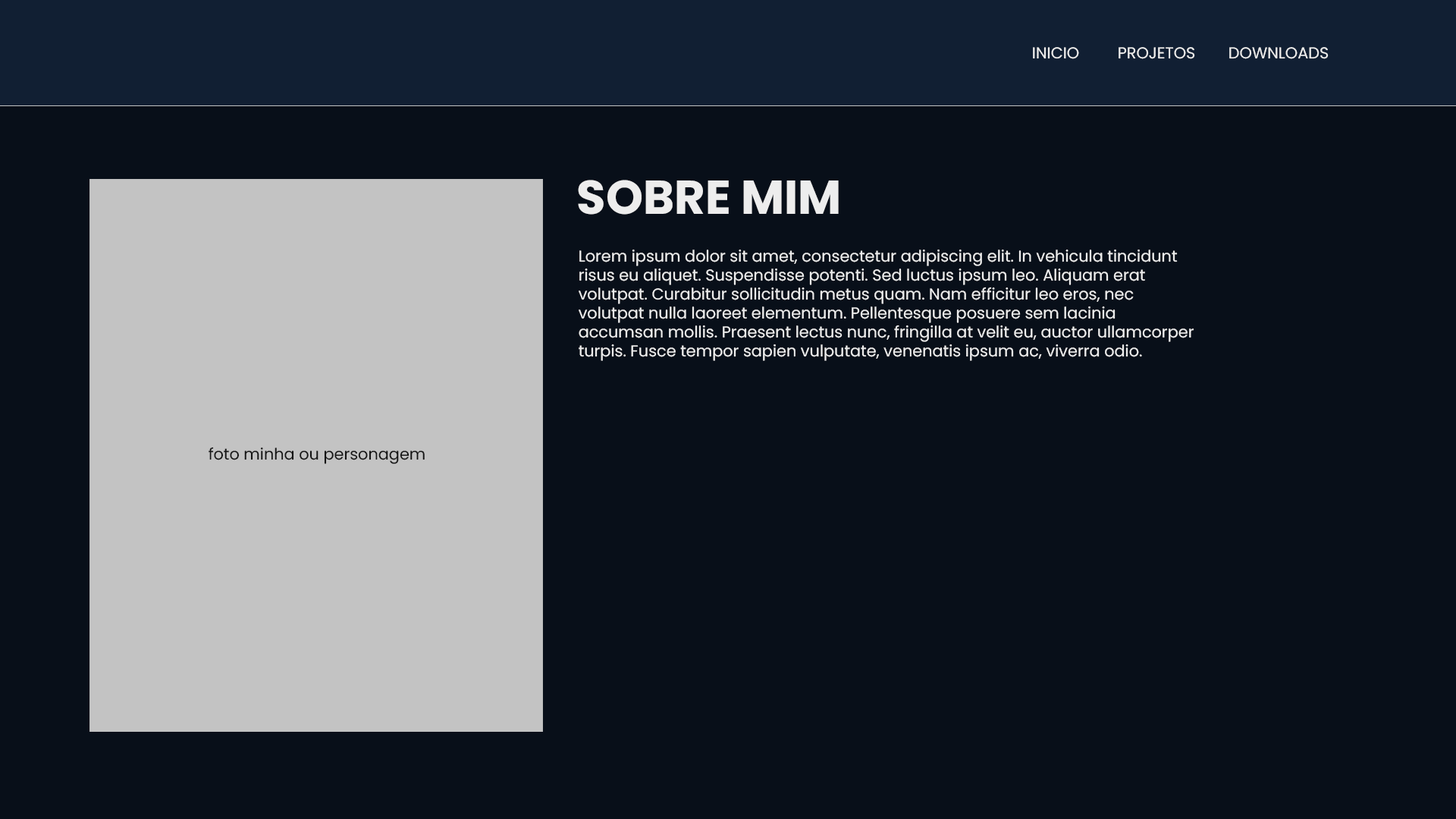
<style>
.page{position:relative;width:1456px;height:819px;background:#080f19}
.page>*{position:absolute;margin:0}
.t1{font:15.8px "Poppins-Regular";color:#ededed}
.t2{font:47.4px "Poppins-Bold";color:#ededed}
.t3{font:15.8px "Poppins-Regular";color:#131313}
</style>
<div class="page">
<p class="t1" style="left:1033px;top:47px;width:46px;height:12px">INICIO</p>
<p class="t1" style="left:1119px;top:47px;width:76px;height:12px">PROJETOS</p>
<p class="t1" style="left:1229px;top:47px;width:100px;height:12px">DOWNLOADS</p>
<p class="t2" style="left:578px;top:180px;width:261px;height:35px">SOBRE MIM</p>
<p class="t1" style="left:579px;top:249px;width:615px;height:112px">Lorem ipsum dolor sit amet, consectetur adipiscing elit. In vehicula tincidunt <br>risus eu aliquet. Suspendisse potenti. Sed luctus ipsum leo. Aliquam erat <br>volutpat. Curabitur sollicitudin metus quam. Nam efficitur leo eros, nec <br>volutpat nulla laoreet elementum. Pellentesque posuere sem lacinia <br>accumsan mollis. Praesent lectus nunc, fringilla at velit eu, auctor ullamcorper <br>turpis. Fusce tempor sapien vulputate, venenatis ipsum ac, viverra odio.</p>
<p class="t3" style="left:209px;top:447px;width:216px;height:17px">foto minha ou personagem</p>
</div>
